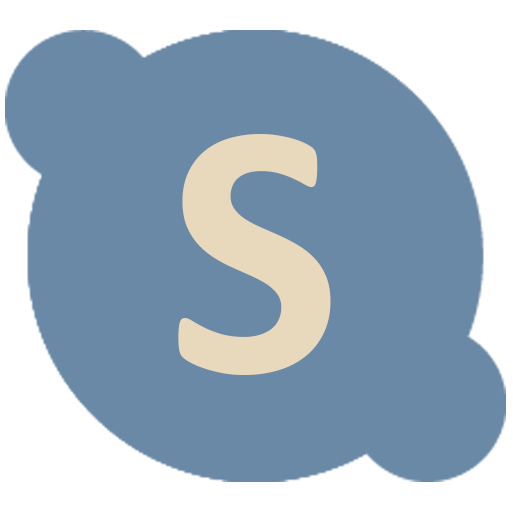
<style>
.page{position:relative;width:513px;height:513px;background:#6a89a6}
.page>*{position:absolute;margin:0}
.t1{font:369.2px "Helvetica-Bold";color:#e8d8bc}
</style>
<div class="page">
<p class="t1" style="left:178px;top:134px;width:153px;height:241px">S</p>
</div>
